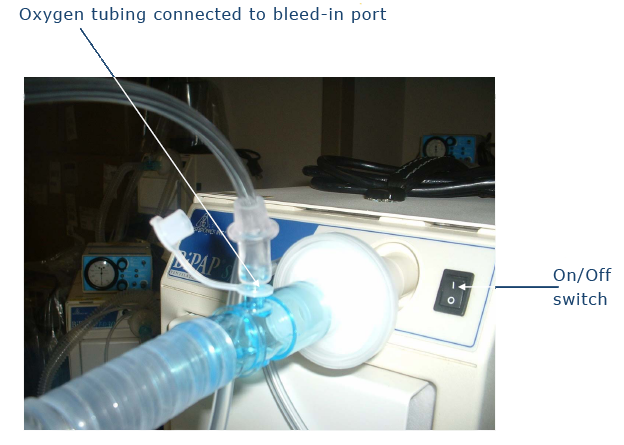
<style>
.page{position:relative;width:624px;height:445px;background:#ffffff}
.page>*{position:absolute;margin:0}
.t1{font:16px "Verdana";letter-spacing:0.05em;color:#19436e}
.t2{font:16px/24px "Verdana";letter-spacing:0.05em;color:#19436e}
</style>
<div class="page">
<p class="t1" style="left:19px;top:7px;width:368px;height:16px">Oxygen tubing connected to bleed-in port</p>
<p class="t2" style="left:553px;top:268px;width:59px;height:37px">On/Off<br>switch</p>
</div>
